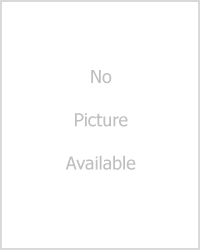
<style>
.page{position:relative;width:200px;height:250px;background:#ffffff}
.page>*{position:absolute;margin:0}
.t1{font:18px "Tahoma";color:#bfbfbf}
</style>
<div class="page">
<p class="t1" style="left:65px;top:70px;width:71px;height:100px;text-align:center">No<br><br>Picture<br><br>Available</p>
</div>
